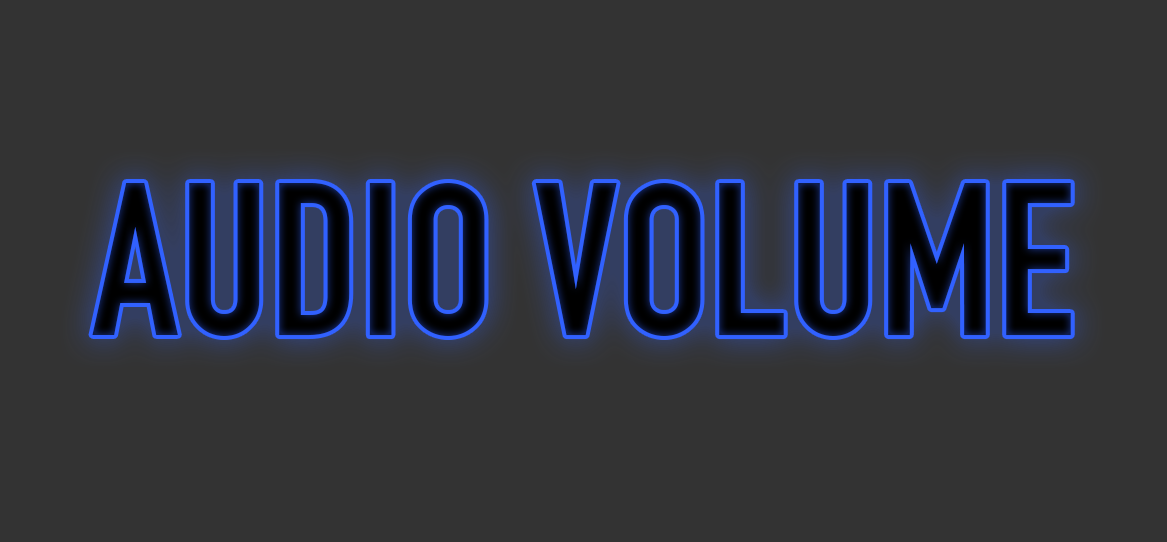
<style>
.page{position:relative;width:1167px;height:542px;background:#333333}
.page>*{position:absolute;margin:0}
.t1{font:212.1px "DINEngschrift";color:#03050e}
</style>
<div class="page">
<p class="t1" style="left:92px;top:183px;width:979px;height:153px">AUDIO VOLUME</p>
</div>
